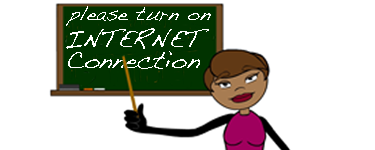
<style>
.page{position:relative;width:375px;height:150px;background:#ffffff}
.page>*{position:absolute;margin:0}
.t1{font:20px "Handwriting-Dakota";color:#ffffff}
.t2{font:25px "Handwriting-Dakota";color:#ffffff}
</style>
<div class="page">
<p class="t1" style="left:66px;top:6px;width:145px;height:20px">please turn on</p>
<p class="t2" style="left:66px;top:28px;width:143px;height:21px">INTERNET</p>
<p class="t2" style="left:68px;top:51px;width:132px;height:18px">Connection</p>
</div>
